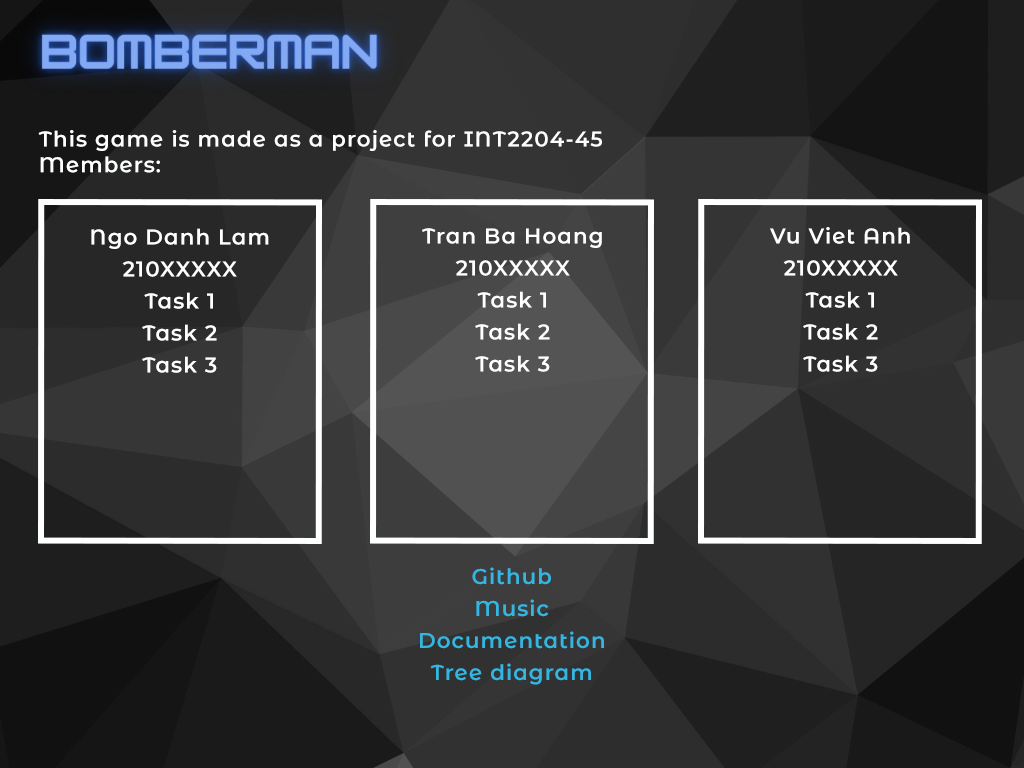
<style>
.page{position:relative;width:1024px;height:768px}
.page>*{position:absolute;margin:0}
.t1{font:21.3px "MontserratAlternates-SemiBold";letter-spacing:0.05em;color:#feffff}
.t2{font:21.3px/32px "MontserratAlternates-SemiBold";letter-spacing:0.05em;color:#feffff}
.t3{font:21.3px/32px "MontserratAlternates-SemiBold";letter-spacing:0.05em;color:#35b6e1}
</style>
<div class="page">
<p class="t1" style="left:38px;top:130px;width:564px;height:43px">This game is made as a project for INT2204-45<br>Members:</p>
<p class="t2" style="left:91px;top:228px;width:178px;height:145px;text-align:center">Ngo Danh Lam<br>210XXXXX<br>Task 1<br>Task 2<br>Task 3</p>
<p class="t2" style="left:422px;top:228px;width:180px;height:144px;text-align:center">Tran Ba Hoang<br>210XXXXX<br>Task 1<br>Task 2<br>Task 3</p>
<p class="t2" style="left:770px;top:227px;width:140px;height:145px;text-align:center">Vu Viet Anh<br>210XXXXX<br>Task 1<br>Task 2<br>Task 3</p>
<p class="t3" style="left:420px;top:567px;width:184px;height:118px;text-align:center">Github<br>Music<br>Documentation<br>Tree diagram</p>
</div>
